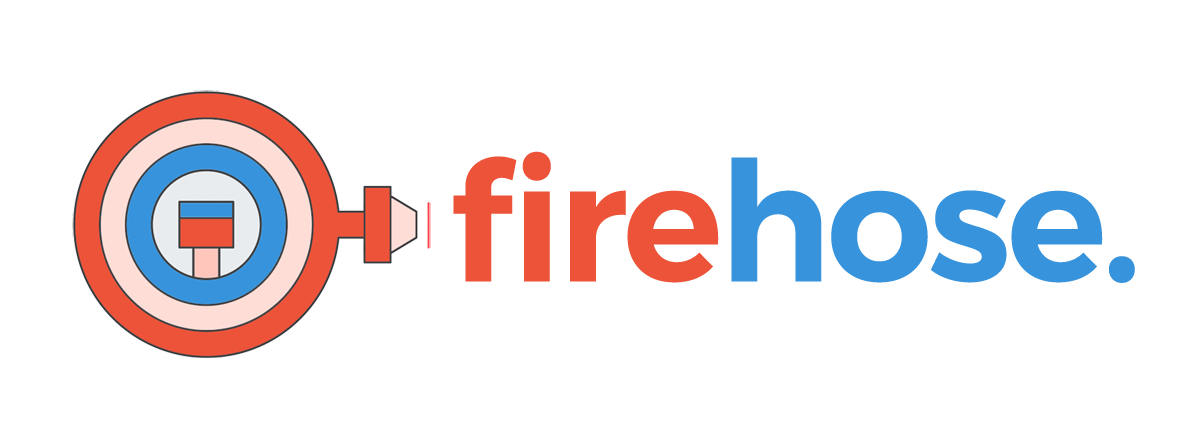
<style>
.page{position:relative;width:1200px;height:447px;background:#ffffff}
.page>*{position:absolute;margin:0}
.t1{font:166.5px "Montserrat-SemiBold";letter-spacing:-0.025em;color:#3794dc}
.t2{font:166.5px "Montserrat-SemiBold";letter-spacing:-0.025em;color:#ec5339}
</style>
<div class="page">
<p class="t1" style="left:453px;top:151px;width:682px;height:132px"><span class="t2">fire</span>hose.</p>
</div>
